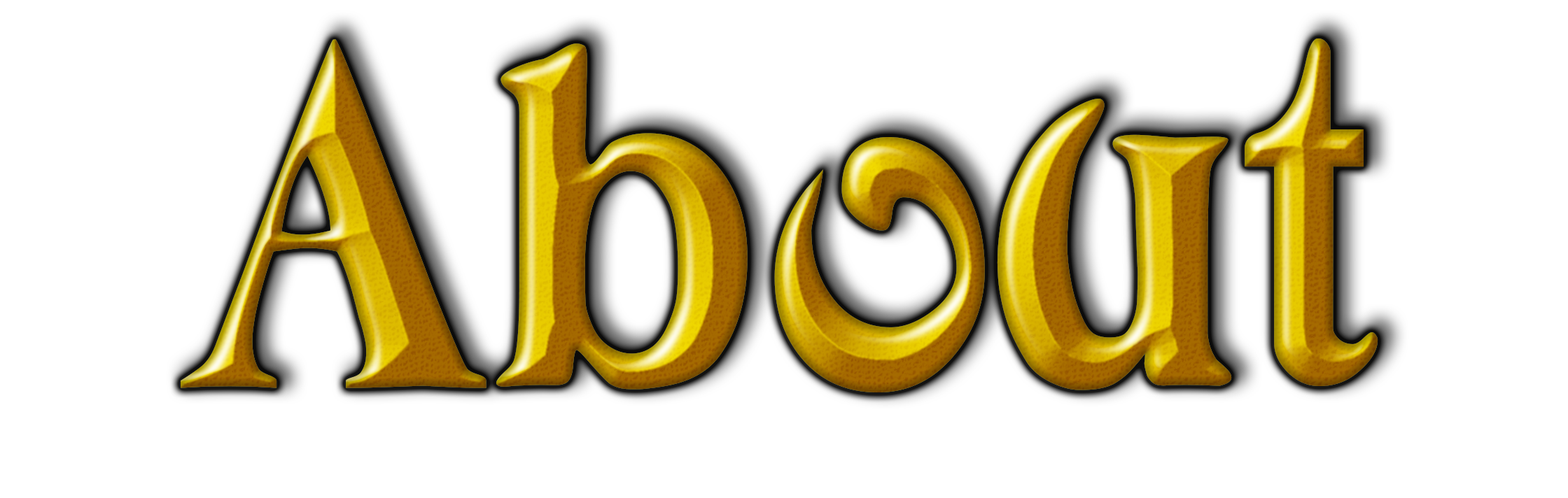
<style>
.page{position:relative;width:1568px;height:498px;background:#ffffff}
.page>*{position:absolute;margin:0}
.t1{font:472.2px "Avatar";letter-spacing:0.05em}
.t2{font:472.2px "Avatar";letter-spacing:-0.01em}
.t3{font:472.2px "Avatar";letter-spacing:-0.05em}
.t4{font:472.2px "Avatar";letter-spacing:0.03em}
.t5{font:472.2px "Avatar";letter-spacing:0.01em}
</style>
<div class="page">
<p class="t1" style="left:181px;top:38px;width:1197px;height:355px">A<span class="t2">b</span><span class="t3">o</span><span class="t4">u</span><span class="t5">t</span></p>
<p class="t1" style="left:181px;top:38px;width:1197px;height:355px">A<span class="t2">b</span><span class="t3">o</span><span class="t4">u</span><span class="t5">t</span></p>
</div>
